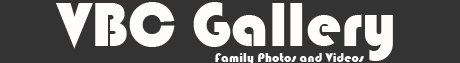
<style>
.page{position:relative;width:460px;height:63px;background:#333333}
.page>*{position:absolute;margin:0}
.t1{font:13.3px "Bauhaus93";color:#fffcfc}
.t2{font:40px "Bauhaus93";color:#fffcfc}
.t3{font:64px "Bauhaus93";color:#fffcfc}
</style>
<div class="page">
<p class="t1" style="left:56px;top:2px;width:337px;height:63px"><span class="t2">        </span><span class="t3">VBC Gallery<br></span>                                                                       Family Photos and Videos</p>
</div>
